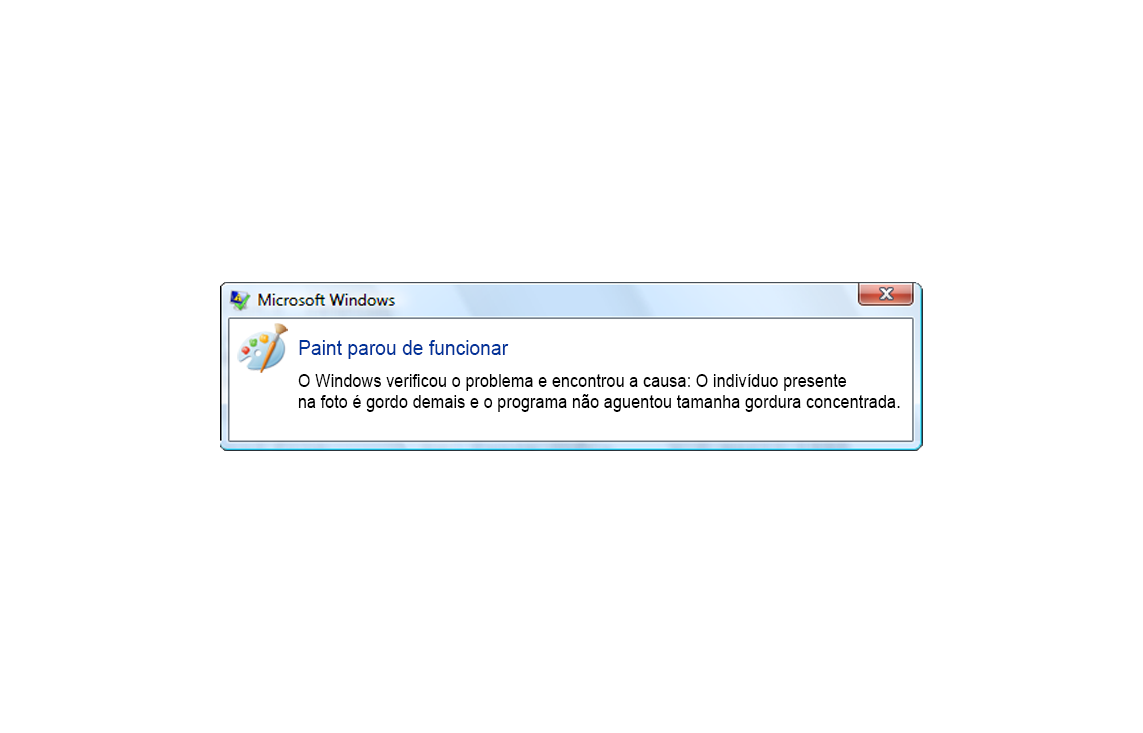
<style>
.page{position:relative;width:1143px;height:733px;background:#ffffff}
.page>*{position:absolute;margin:0}
.t1{font:21.2px "ArialMT";color:#003399;scale:0.91 1}
.t2{font:18px "ArialMT";color:#000000;scale:0.91 1}
</style>
<div class="page">
<p class="t1" style="left:299px;top:340px;width:210px;height:19px">Paint parou de funcionar</p>
<p class="t2" style="left:298px;top:374px;width:602px;height:38px">O Windows verificou o problema e encontrou a causa: O indivíduo presente<br>na foto é gordo demais e o programa não aguentou tamanha gordura concentrada.</p>
</div>
